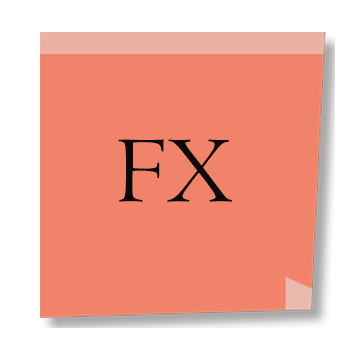
<style>
.page{position:relative;width:350px;height:350px;background:#f1836a}
.page>*{position:absolute;margin:0}
.t1{font:97.6px "Centaur";color:#0b0b0b}
</style>
<div class="page">
<p class="t1" style="left:118px;top:139px;width:115px;height:63px">FX</p>
</div>
